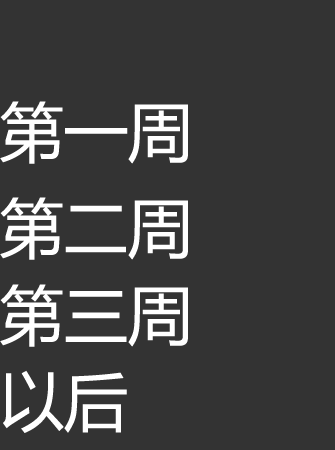
<style>
.page{position:relative;width:335px;height:450px;background:#333333}
.page>*{position:absolute;margin:0}
.t1{font:64px "MicrosoftYaHei";color:#ffffff}
</style>
<div class="page">
<p class="t1" style="left:0px;top:101px;width:188px;height:63px">第一周</p>
<p class="t1" style="left:0px;top:197px;width:188px;height:63px">第二周</p>
<p class="t1" style="left:0px;top:284px;width:188px;height:63px">第三周</p>
<p class="t1" style="left:3px;top:370px;width:124px;height:63px">以后</p>
</div>
